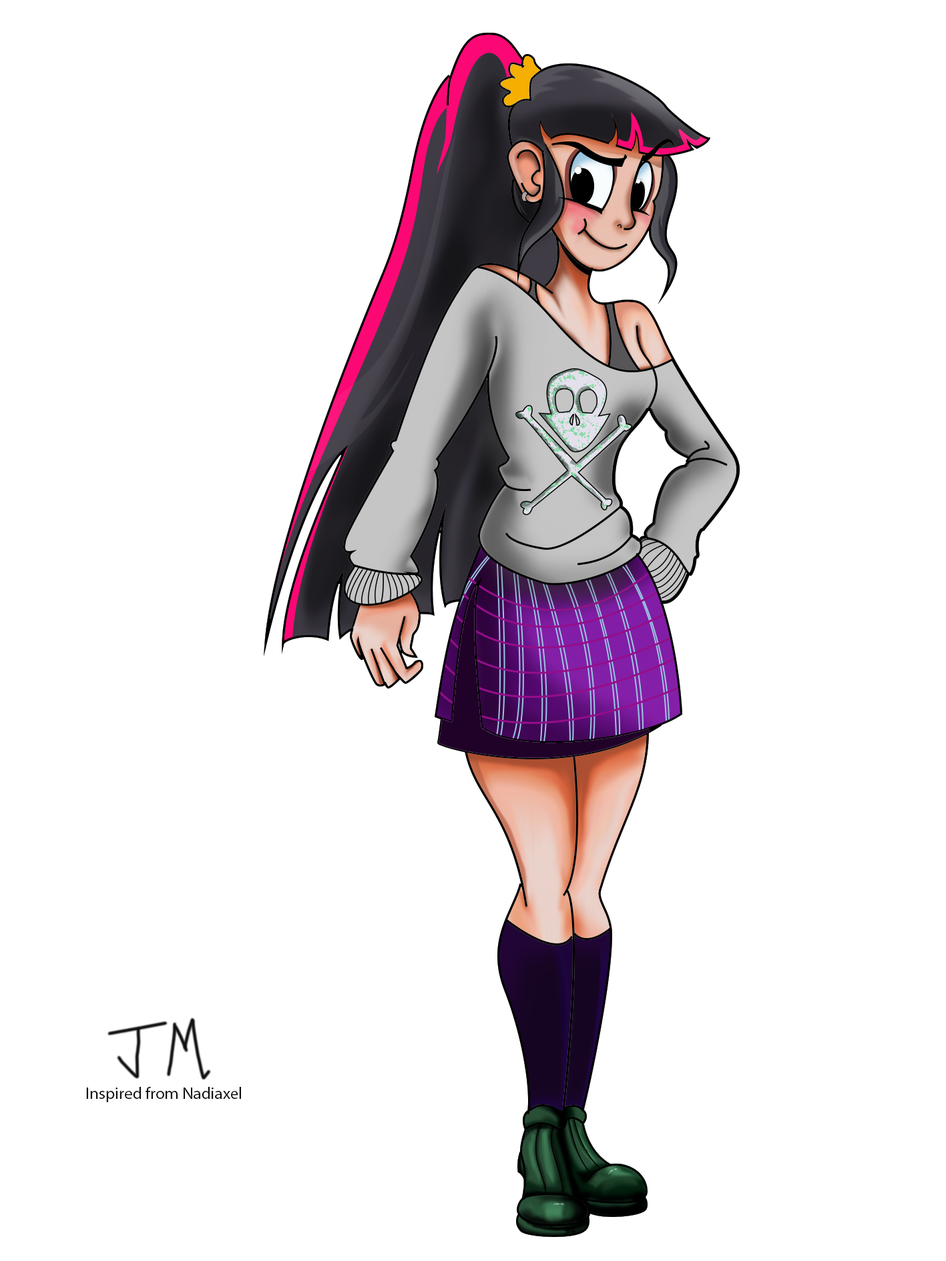
<style>
.page{position:relative;width:946px;height:1261px;background:#ffffff}
.page>*{position:absolute;margin:0}
.t1{font:16.7px "MyriadPro-Regular";color:#0f0e0e}
</style>
<div class="page">
<p class="t1" style="left:86px;top:1087px;width:155px;height:15px">Inspired from Nadiaxel</p>
</div>
